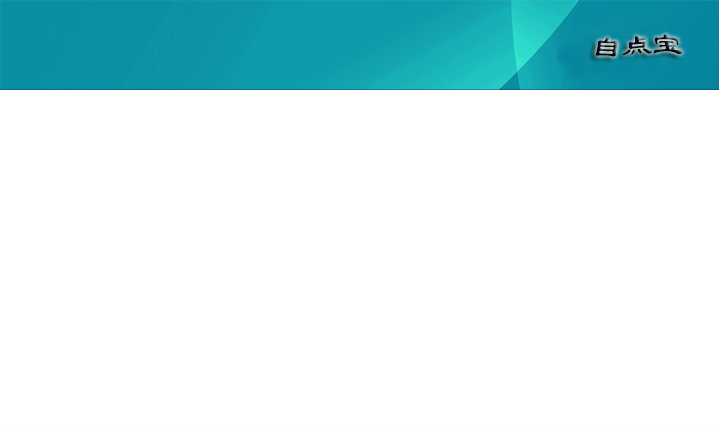
<style>
.page{position:relative;width:719px;height:432px;background:#ffffff}
.page>*{position:absolute;margin:0}
.t1{font:30px "LiSu"}
</style>
<div class="page">
<p class="t1" style="left:595px;top:34px;width:88px;height:23px">自点宝</p>
</div>
